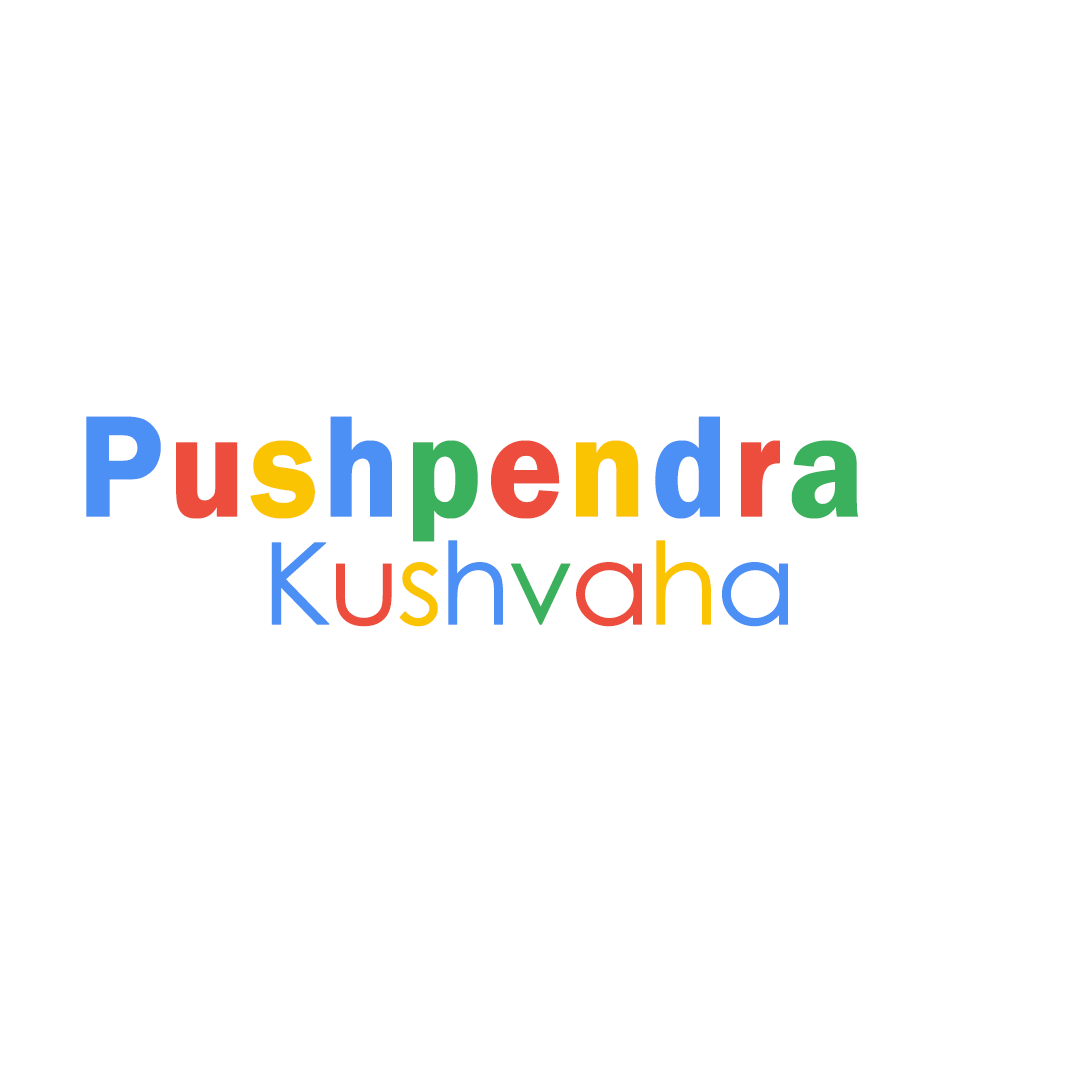
<style>
.page{position:relative;width:1080px;height:1080px;background:#ffffff}
.page>*{position:absolute;margin:0}
.t1{font:149.1px "FranklinGothic-Demi";letter-spacing:0.01em;color:#4c90f6;font-weight:bold;scale:0.95 1}
.t2{font:149.1px "FranklinGothic-Demi";letter-spacing:0.01em;color:#ed4d3c;font-weight:bold;scale:0.95 1}
.t3{font:149.1px "FranklinGothic-Demi";letter-spacing:0.01em;color:#fbc403;font-weight:bold;scale:0.95 1}
.t4{font:149.1px "FranklinGothic-Demi";letter-spacing:0.01em;color:#3bb15d;font-weight:bold;scale:0.95 1}
.t5{font:113.5px "CenturyGothic";letter-spacing:-0.05em;color:#4c90f6;font-weight:bold;scale:1.03 1}
.t6{font:113.5px "CenturyGothic";letter-spacing:-0.05em;color:#ed4d3c;font-weight:bold;scale:1.03 1}
.t7{font:113.5px "CenturyGothic";letter-spacing:-0.05em;color:#fbc403;font-weight:bold;scale:1.03 1}
.t8{font:113.5px "CenturyGothic";letter-spacing:-0.05em;color:#3bb15d;font-weight:bold;scale:1.03 1}
</style>
<div class="page">
<p class="t1" style="left:86px;top:416px;width:772px;height:126px">P<span class="t2">u</span><span class="t3">s</span>h<span class="t4">p</span><span class="t2">e</span><span class="t3">n</span>d<span class="t2">r</span><span class="t4">a</span></p>
<p class="t5" style="left:271px;top:540px;width:517px;height:87px">K<span class="t6">u</span><span class="t7">s</span>h<span class="t8">v</span><span class="t6">a</span><span class="t7">h</span>a</p>
</div>
